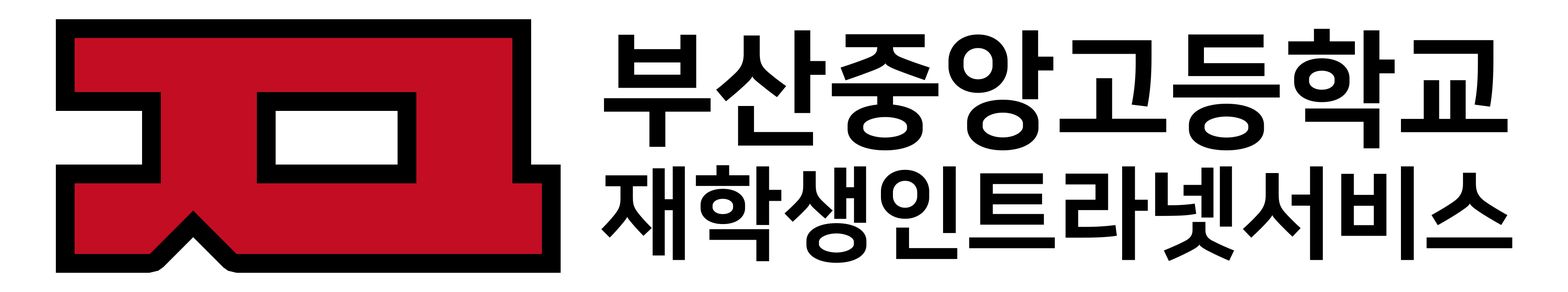
<style>
.page{position:relative;width:1568px;height:292px;background:#ffffff}
.page>*{position:absolute;margin:0}
.t1{font:100.5px/136.3px "NanumSquareOTFEB";color:#000000}
.t2{font:125.1px/136.3px "NanumSquareOTFEB";color:#000000}
</style>
<div class="page">
<p class="t1" style="left:601px;top:29px;width:912px;height:234px"><span class="t2">부산중앙고등학교<br></span>재학생인트라넷서비스</p>
</div>
